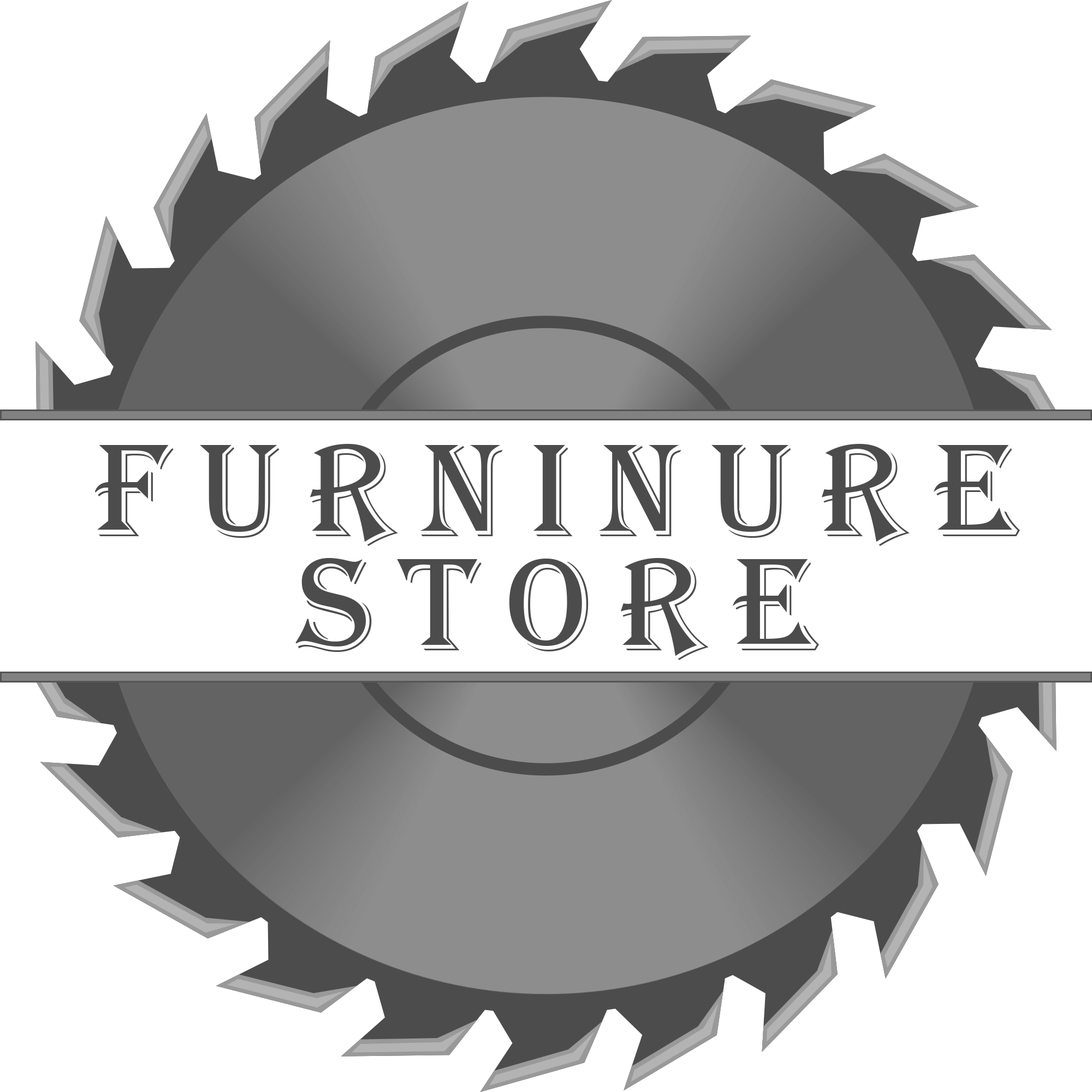
<style>
.page{position:relative;width:1092px;height:1092px;background:#ffffff}
.page>*{position:absolute;margin:0}
.t1{font:136.5px "Algerian";letter-spacing:0.2em;color:#4c4c4c;text-transform:uppercase}
</style>
<div class="page">
<p class="t1" style="left:95px;top:444px;width:925px;height:102px">FURNINURE</p>
<p class="t1" style="left:295px;top:558px;width:524px;height:102px">STORE</p>
</div>
